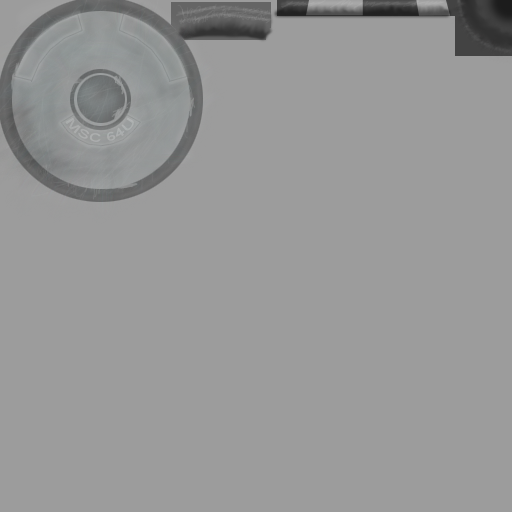
<style>
.page{position:relative;width:512px;height:512px;background:#9c9c9c}
.page>*{position:absolute;margin:0}
.t1{font:12px "ArialMT";color:#abadad}
</style>
<div class="page">
<p class="t1" style="left:65px;top:117px;width:69px;height:25px;text-align:center">MSC 64U</p>
</div>
